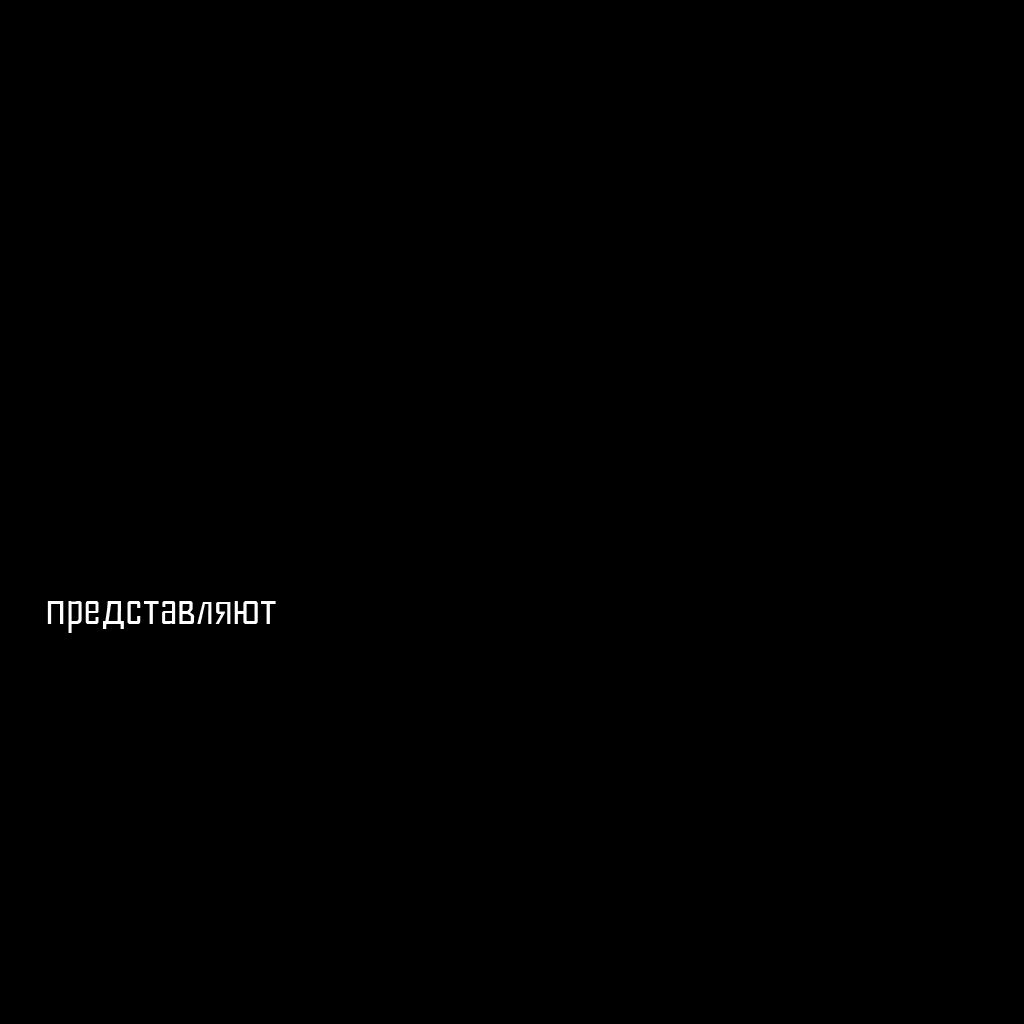
<style>
.page{position:relative;width:1024px;height:1024px;background:#000000}
.page>*{position:absolute;margin:0}
.t1{font:48px "AgencyFBCyrillic";color:#ffffff}
</style>
<div class="page">
<p class="t1" style="left:47px;top:601px;width:229px;height:32px">представляют</p>
</div>
